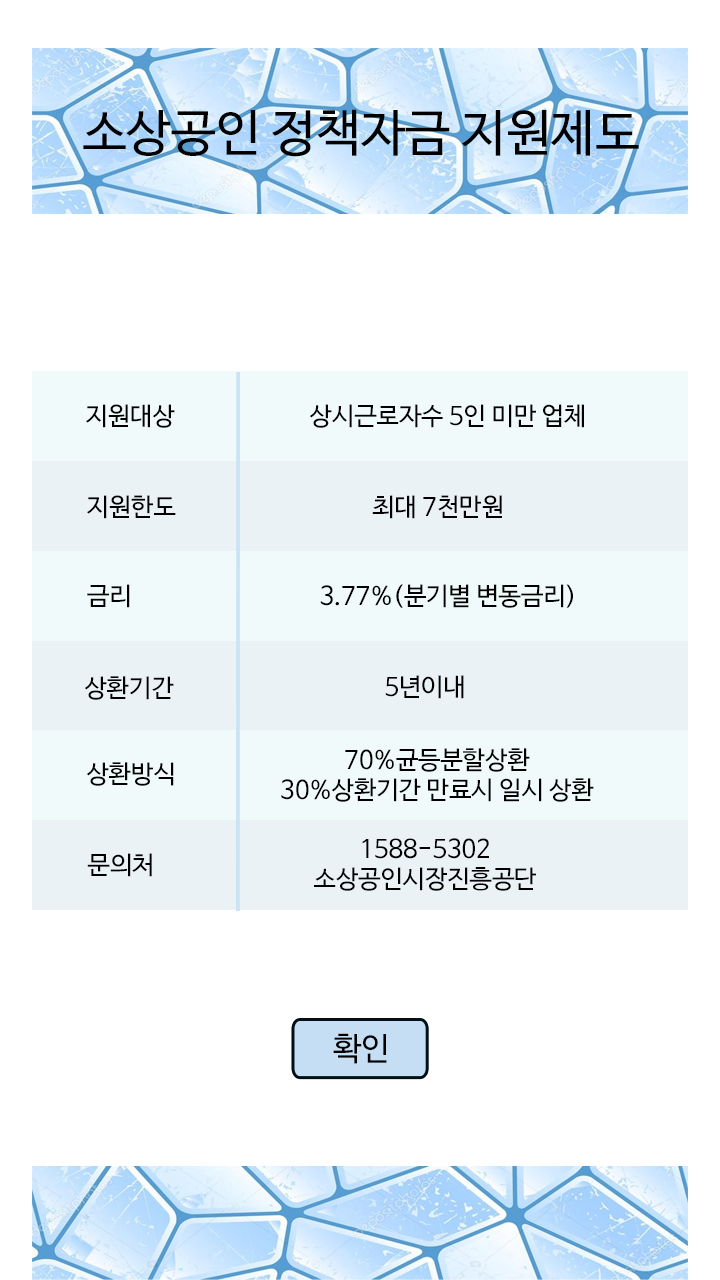
<style>
.page{position:relative;width:720px;height:1280px;background:#ffffff}
.page>*{position:absolute;margin:0}
.t1{font:50px "NanumBarunGothic";color:#000000}
.t2{font:25px "NanumBarunGothic";color:#000000}
.t3{font:25px/30px "NanumBarunGothic";color:#000000}
.t4{font:32px "NanumBarunGothic";color:#000000}
</style>
<div class="page">
<p class="t1" style="left:83px;top:109px;width:556px;height:48px">소상공인 정책자금 지원제도</p>
<p class="t2" style="left:86px;top:404px;width:89px;height:24px">지원대상</p>
<p class="t2" style="left:309px;top:404px;width:275px;height:24px">상시근로자수 5인 미만 업체</p>
<p class="t2" style="left:87px;top:495px;width:89px;height:24px">지원한도</p>
<p class="t2" style="left:372px;top:495px;width:130px;height:24px">최대 7천만원</p>
<p class="t2" style="left:87px;top:584px;width:43px;height:24px">금리</p>
<p class="t2" style="left:320px;top:584px;width:253px;height:24px">3.77%(분기별 변동금리)</p>
<p class="t2" style="left:84px;top:676px;width:90px;height:24px">상환기간</p>
<p class="t2" style="left:385px;top:675px;width:79px;height:24px">5년이내</p>
<p class="t3" style="left:281px;top:748px;width:313px;height:54px;text-align:center">70%균등분할상환<br>30%상환기간 만료시 일시 상환</p>
<p class="t2" style="left:86px;top:762px;width:88px;height:24px">상환방식</p>
<p class="t3" style="left:314px;top:838px;width:222px;height:53px;text-align:center">1588-5302<br>소상공인시장진흥공단</p>
<p class="t2" style="left:87px;top:853px;width:65px;height:24px">문의처</p>
<p class="t4" style="left:333px;top:1033px;width:54px;height:31px">확인</p>
</div>
